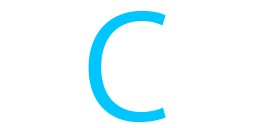
<style>
.page{position:relative;width:256px;height:128px;background:#ffffff}
.page>*{position:absolute;margin:0}
.t1{font:140.9px "KozGoPr6N-Regular";color:#00c6ff;font-weight:bold}
</style>
<div class="page">
<p class="t1" style="left:88px;top:10px;width:78px;height:113px">C</p>
</div>
